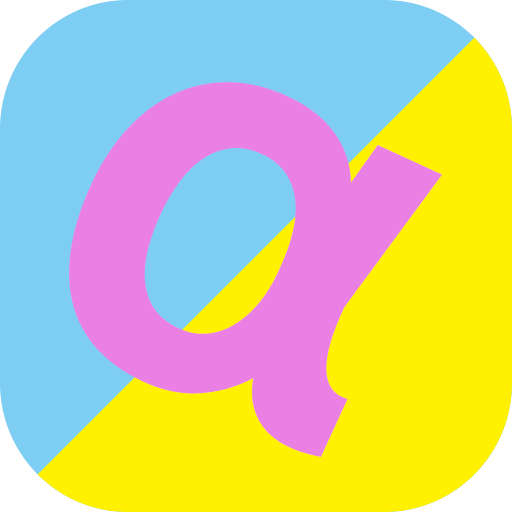
<style>
.page{position:relative;width:512px;height:512px;background:#fff100}
.page>*{position:absolute;margin:0}
.t1{font:616px "Consolas-Bold";letter-spacing:0.045em;color:#ea80e4}
</style>
<div class="page">
<p class="t1" style="left:69px;top:82px;width:373px;height:375px;rotate:25deg">α</p>
</div>
